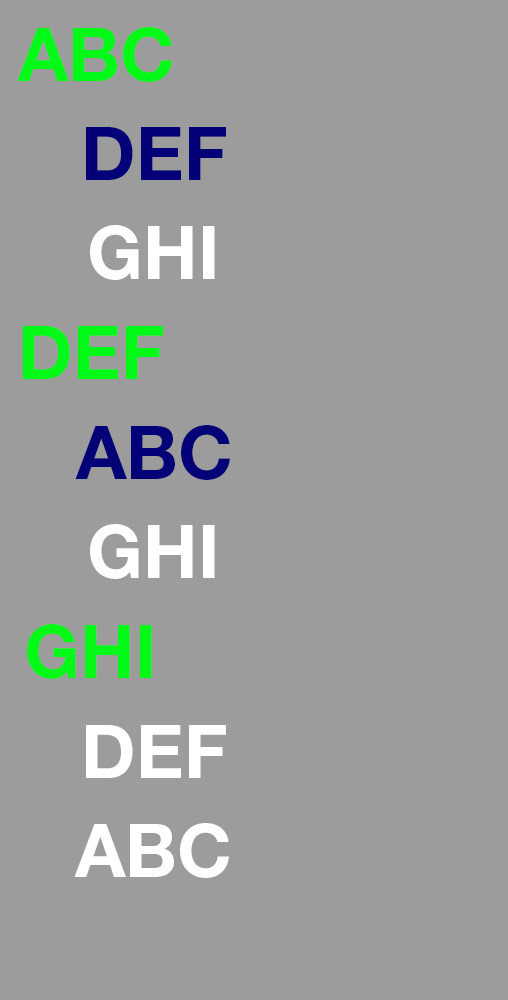
<style>
.page{position:relative;width:508px;height:1000px;background:#9c9c9c}
.page>*{position:absolute;margin:0}
.t1{font:73.8px "HelveticaNeueLTStd-Bd";color:#00f917}
.t2{font:73.8px "HelveticaNeueLTStd-Bd";color:#030078}
.t3{font:73.8px "HelveticaNeueLTStd-Bd";color:#ffffff}
</style>
<div class="page">
<p class="t1" style="left:17px;top:27px;width:155px;height:55px">ABC</p>
<p class="t2" style="left:86px;top:127px;width:140px;height:53px">DEF</p>
<p class="t3" style="left:90px;top:225px;width:125px;height:55px">GHI</p>
<p class="t1" style="left:23px;top:326px;width:140px;height:53px">DEF</p>
<p class="t2" style="left:75px;top:425px;width:155px;height:55px">ABC</p>
<p class="t3" style="left:90px;top:524px;width:125px;height:55px">GHI</p>
<p class="t1" style="left:27px;top:624px;width:125px;height:55px">GHI</p>
<p class="t3" style="left:86px;top:725px;width:140px;height:53px">DEF</p>
<p class="t3" style="left:74px;top:823px;width:155px;height:55px">ABC</p>
</div>
